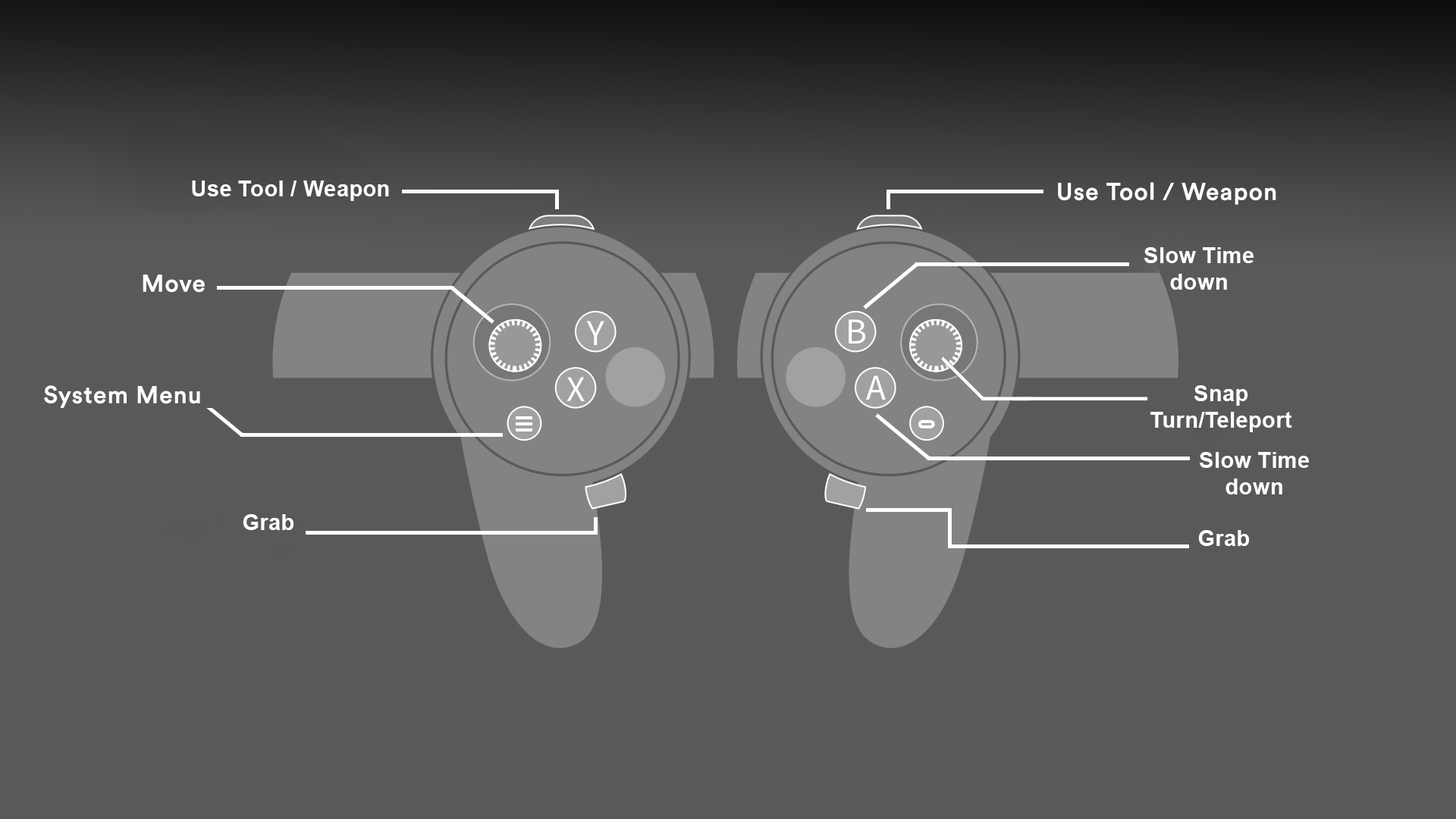
<style>
.page{position:relative;width:1456px;height:819px;background:#595959}
.page>*{position:absolute;margin:0}
.t1{font:22.1px "Arial-BoldMT";letter-spacing:0.01em;color:#ffffff}
</style>
<div class="page">
<p class="t1" style="left:192px;top:180px;width:197px;height:21px">Use Tool / Weapon</p>
<p class="t1" style="left:1144px;top:247px;width:110px;height:43px;text-align:center">Slow Time down</p>
<p class="t1" style="left:1150px;top:385px;width:142px;height:47px;text-align:center">Snap Turn/Teleport</p>
<p class="t1" style="left:1200px;top:452px;width:109px;height:42px;text-align:center">Slow Time down</p>
<p class="t1" style="left:243px;top:514px;width:50px;height:16px">Grab</p>
<p class="t1" style="left:1198px;top:530px;width:51px;height:16px">Grab</p>
</div>
